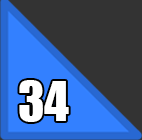
<style>
.page{position:relative;width:142px;height:140px;background:#333333}
.page>*{position:absolute;margin:0}
.t1{font:50px "Impact";color:#ffffff}
</style>
<div class="page">
<p class="t1" style="left:19px;top:80px;width:50px;height:42px">34</p>
</div>
